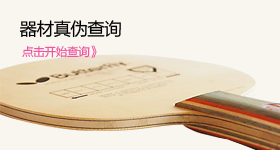
<style>
.page{position:relative;width:280px;height:150px;background:#f9f6f0}
.page>*{position:absolute;margin:0}
.t1{font:18px "FZLTHJW--GB1-0";letter-spacing:-0.06em;color:#000000}
.t2{font:12px "FZLTXHK";letter-spacing:-0.06em;color:#ed4c9a}
</style>
<div class="page">
<p class="t1" style="left:19px;top:20px;width:102px;height:18px">器材真伪查询</p>
<p class="t2" style="left:22px;top:45px;width:75px;height:13px">点击开始查询》</p>
</div>
